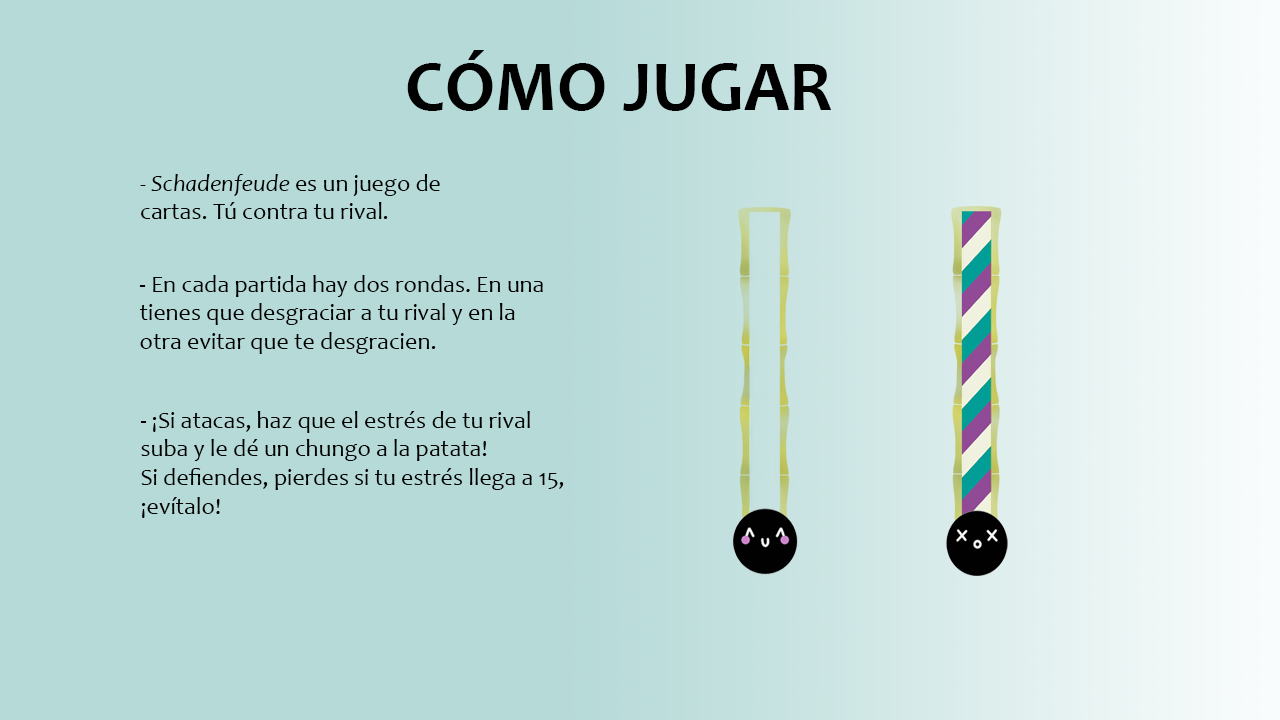
<style>
.page{position:relative;width:1280px;height:720px;background:#b6dad8}
.page>*{position:absolute;margin:0}
.t1{font:72px "Candara-Bold";color:#000000}
.t2{font:24px "Candara";color:#000000}
.t3{font:24px "Candara-Italic";color:#000000}
</style>
<div class="page">
<p class="t1" style="left:407px;top:50px;width:424px;height:61px">CÓMO JUGAR</p>
<p class="t2" style="left:140px;top:174px;width:300px;height:45px"><span class="t3">- Schadenfeude</span> es un juego de cartas. Tú contra tu rival.</p>
<p class="t2" style="left:139px;top:275px;width:404px;height:79px">- En cada partida hay dos rondas. En una tienes que desgraciar a tu rival y en la otra evitar que te desgracien.</p>
<p class="t2" style="left:140px;top:411px;width:424px;height:107px">- ¡Si atacas, haz que el estrés de tu rival suba y le dé un chungo a la patata!<br>Si defiendes, pierdes si tu estrés llega a 15, ¡evítalo!</p>
</div>
